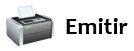
<style>
.page{position:relative;width:134px;height:51px;background:#ffffff}
.page>*{position:absolute;margin:0}
.t1{font:24px "Candara-Bold";color:#000000}
</style>
<div class="page">
<p class="t1" style="left:66px;top:18px;width:62px;height:16px">Emitir</p>
</div>
